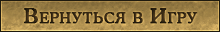
<style>
.page{position:relative;width:220px;height:32px}
.page>*{position:absolute;margin:0}
.t1{font:20.7px "CooperMediumCBT";letter-spacing:0.04em;color:#322512;font-variant:small-caps;font-weight:bold}
</style>
<div class="page">
<p class="t1" style="left:24px;top:8px;width:174px;height:16px">Вернуться в Игру</p>
</div>
